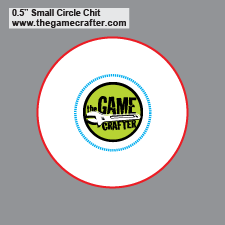
<style>
.page{position:relative;width:225px;height:225px;background:#929497}
.page>*{position:absolute;margin:0}
.t1{font:8.8px/10px "Arial-BoldMT";color:#231f20}
.t2{font:8.8px/10px "Arial-BoldMT";letter-spacing:0.05em;color:#231f20}
</style>
<div class="page">
<p class="t1" style="left:12px;top:9px;width:114px;height:19px">0.5” Small Circle Chit<br><span class="t2">www.thegamecrafter.com</span></p>
</div>
